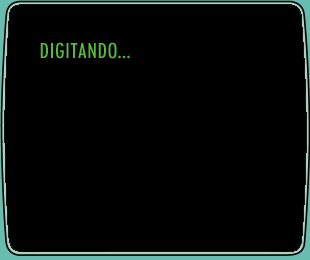
<style>
.page{position:relative;width:310px;height:260px;background:#000000}
.page>*{position:absolute;margin:0}
.t1{font:24px "TwCenMT-Condensed";color:#55bc3a}
</style>
<div class="page">
<p class="t1" style="left:40px;top:42px;width:90px;height:17px">DIGITANDO...</p>
</div>
